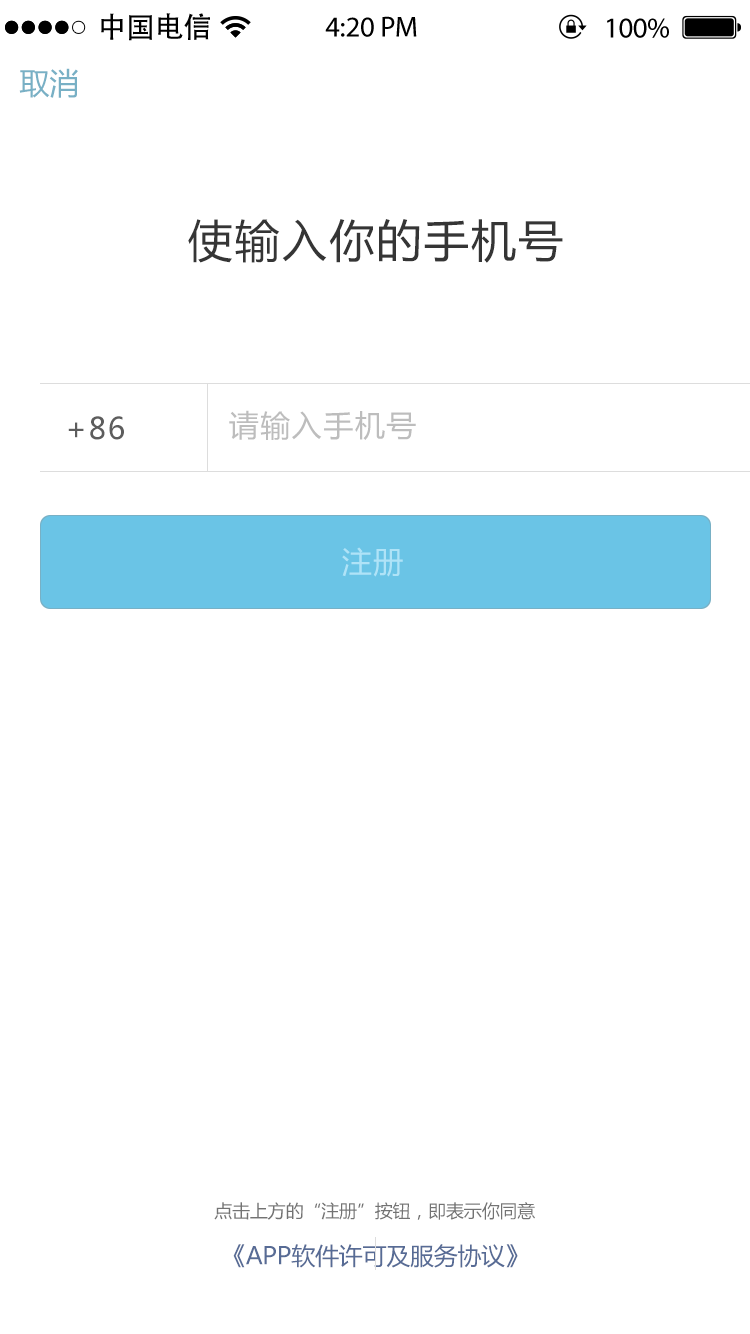
<style>
.page{position:relative;width:750px;height:1334px;background:#ffffff}
.page>*{position:absolute;margin:0}
.t1{font:28.8px "AdobeHeitiStd-Regular";color:#000000}
.t2{font:28.8px "MyriadPro-Regular";color:#000000}
.t3{font:30px "MicrosoftYaHei";color:#78b0c5}
.t4{font:45px "MicrosoftYaHei";letter-spacing:0.05em;color:#353535}
.t5{font:30px "MicrosoftYaHei";letter-spacing:0.05em;color:#bdbdbd}
.t6{font:30px "MicrosoftYaHei";letter-spacing:0.05em;color:#5d5d5d}
.t7{font:30px "MicrosoftYaHei";letter-spacing:0.05em;color:#afe3f7}
.t8{font:18px "MicrosoftYaHei";letter-spacing:-0.01em;color:#737373}
.t9{font:24px "MicrosoftYaHei";letter-spacing:-0.01em;color:#576b95}
</style>
<div class="page">
<p class="t1" style="left:101px;top:13px;width:109px;height:28px">中国电信</p>
<p class="t2" style="left:325px;top:16px;width:92px;height:21px">4:20 PM</p>
<p class="t2" style="left:607px;top:18px;width:62px;height:20px">100%</p>
<p class="t3" style="left:19px;top:68px;width:59px;height:30px">取消</p>
<p class="t4" style="left:188px;top:219px;width:375px;height:44px">使输入你的手机号</p>
<p class="t5" style="left:229px;top:410px;width:187px;height:30px">请输入手机号</p>
<p class="t6" style="left:68px;top:416px;width:56px;height:24px">+86</p>
<p class="t7" style="left:342px;top:547px;width:61px;height:30px">注册</p>
<p class="t8" style="left:214px;top:1202px;width:321px;height:18px">点击上方的“注册”按钮，即表示你同意</p>
<p class="t9" style="left:233px;top:1244px;width:285px;height:24px">《APP软件许可及服务协议》</p>
</div>
